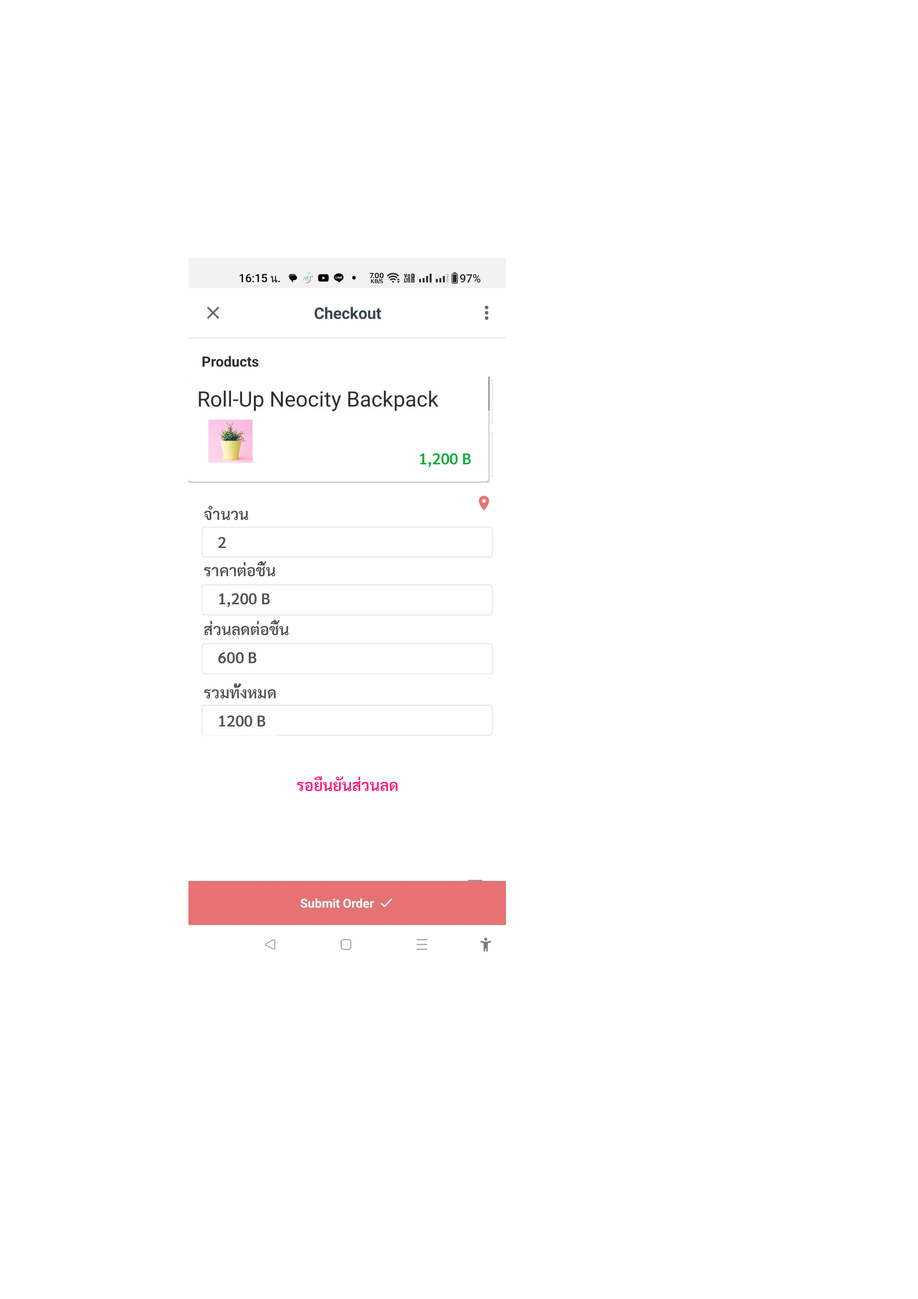
<style>
.page{position:relative;width:918px;height:1299px;background:#ffffff}
.page>*{position:absolute;margin:0}
.t1{font:15.6px "Sarabun-SemiBold";color:#00af31}
.t2{font:15.6px "Sarabun-SemiBold";color:#545454}
.t3{font:15.6px "Sarabun-SemiBold";color:#ff127c}
</style>
<div class="page">
<p class="t1" style="left:420px;top:453px;width:51px;height:14px">1,200 B</p>
<p class="t2" style="left:204px;top:505px;width:44px;height:15px">จำนวน</p>
<p class="t2" style="left:218px;top:537px;width:8px;height:11px">2</p>
<p class="t2" style="left:204px;top:561px;width:71px;height:15px">ราคาต่อชิ้น</p>
<p class="t2" style="left:219px;top:593px;width:51px;height:14px">1,200 B</p>
<p class="t2" style="left:204px;top:620px;width:85px;height:15px">ส่วนลดต่อชิ้น</p>
<p class="t2" style="left:218px;top:652px;width:39px;height:11px">600 B</p>
<p class="t2" style="left:204px;top:683px;width:72px;height:16px">รวมทั้งหมด</p>
<p class="t2" style="left:219px;top:715px;width:46px;height:12px">1200 B</p>
<p class="t3" style="left:297px;top:776px;width:101px;height:15px">รอยืนยันส่วนลด</p>
</div>
